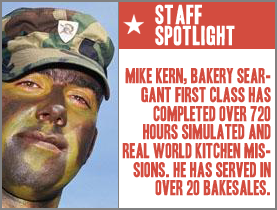
<style>
.page{position:relative;width:277px;height:210px;background:#ffffff}
.page>*{position:absolute;margin:0}
.t1{font:24px/21.3px "HeadlineOneHPLHS";letter-spacing:0.025em;color:#ffffff;text-transform:uppercase}
.t2{font:18.7px/18.7px "HeadlineOneHPLHS";color:#d34c3f;text-transform:uppercase}
</style>
<div class="page">
<p class="t1" style="left:155px;top:4px;width:80px;height:42px">staff <br>spotlight</p>
<p class="t2" style="left:122px;top:68px;width:149px;height:128px;text-align:right">Mike kern, bakery seargant First Class has completed over 720 hours simulated and real world kitchen missions. He has served in over 20 bakesales.</p>
</div>
